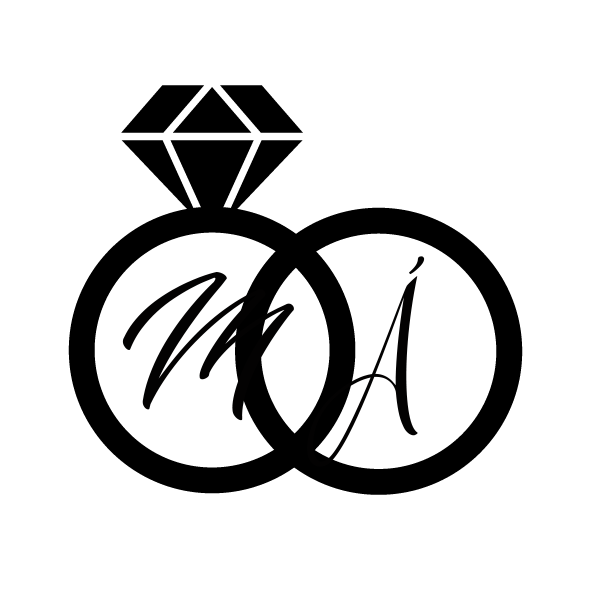
<style>
.page{position:relative;width:591px;height:591px;background:#ffffff}
.page>*{position:absolute;margin:0}
.t1{font:150px "GERALDINEPERSONALUSE-Italic";color:#030202}
</style>
<div class="page">
<p class="t1" style="left:307px;top:256px;width:118px;height:211px;rotate:-26deg">Á</p>
<p class="t1" style="left:122px;top:272px;width:172px;height:149px">M&amp;</p>
</div>
